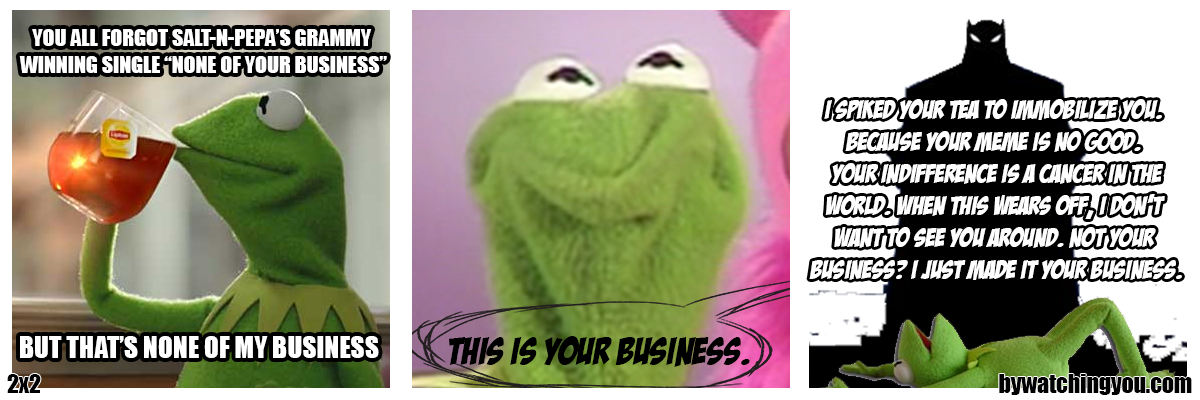
<style>
.page{position:relative;width:1200px;height:400px;background:#ffffff}
.page>*{position:absolute;margin:0}
.t1{font:22.3px "Impact";color:#ffffff}
.t2{font:26.6px "BadaBoomBB";color:#ffffff}
.t3{font:27.7px "Impact";color:#ffffff}
.t4{font:38.4px "BadaBoomBB";color:#000000}
.t5{font:23.7px "Impact";color:#000000}
</style>
<div class="page">
<p class="t1" style="left:19px;top:29px;width:368px;height:44px;text-align:center">YOU ALL FORGOT SALT-N-PEPA’S GRAMMY <br>WINNING SINGLE “NONE OF YOUR BUSINESS”</p>
<p class="t2" style="left:809px;top:99px;width:373px;height:181px;text-align:center">i SPIKED your tea TO IMMOBILIZE YOU. <br>BECAUSE your meme IS NO GOOD. <br>YOUR indifference IS a cancer in THE<br>WORLD. when this wears off, I DON’T <br>WANT TO SEE YOU around. NOT YOUR <br>BUSINESS? I JUST MADE IT YOUR BUSINESS.</p>
<p class="t3" style="left:20px;top:336px;width:359px;height:22px">BUT THAT’S NONE OF MY BUSINESS</p>
<p class="t4" style="left:449px;top:336px;width:301px;height:31px">this is your business.</p>
<p class="t5" style="left:7px;top:374px;width:34px;height:19px">2x2</p>
<p class="t5" style="left:999px;top:374px;width:193px;height:21px">bywatchingyou.com</p>
</div>
